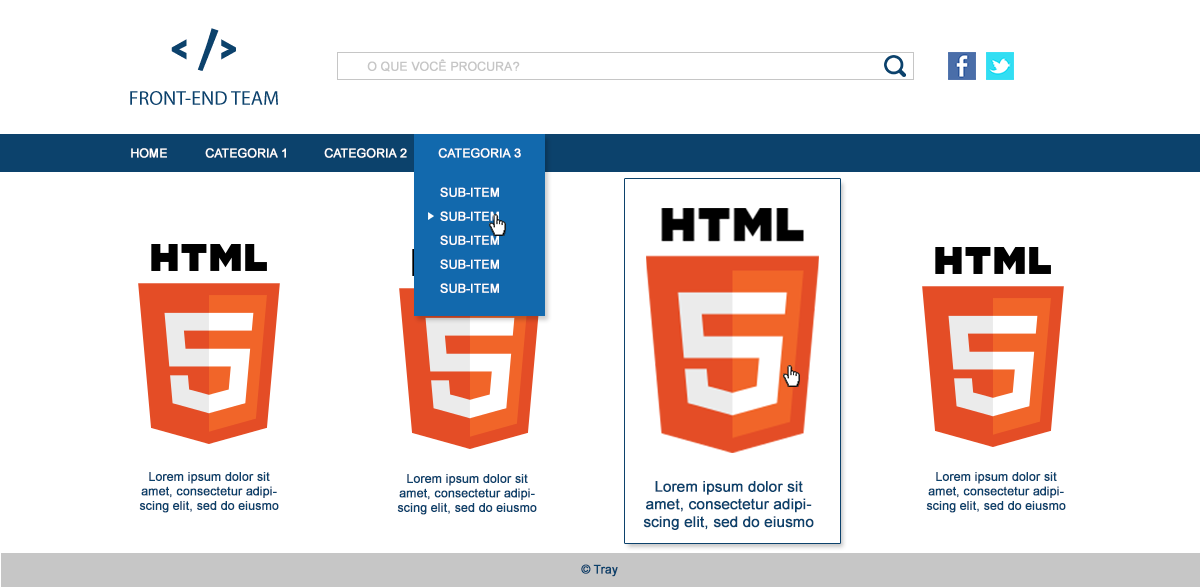
<style>
.page{position:relative;width:1200px;height:587px;background:#ffffff}
.page>*{position:absolute;margin:0}
.t1{font:12px "ArialMT";color:#c6c6c6;text-transform:uppercase;font-weight:bold}
.t2{font:12px "ArialMT";color:#ffffff;text-transform:uppercase;font-weight:bold}
.t3{font:12px/24px "ArialMT";color:#ffffff;text-transform:uppercase;font-weight:bold}
.t4{font:12px "ArialMT";color:#0c426c;font-weight:bold}
.t5{font:14.7px "ArialMT";color:#0c426c;font-weight:bold}
</style>
<div class="page">
<p class="t1" style="left:367px;top:59px;width:153px;height:13px">O que você procura?</p>
<p class="t2" style="left:131px;top:148px;width:36px;height:10px">HOME</p>
<p class="t2" style="left:205px;top:148px;width:81px;height:10px">CATEGORIA 1</p>
<p class="t2" style="left:324px;top:148px;width:83px;height:10px">CATEGORIA 2</p>
<p class="t2" style="left:438px;top:148px;width:83px;height:10px">CATEGORIA 3</p>
<p class="t3" style="left:440px;top:187px;width:59px;height:106px">SUB-ITEM<br>SUB-ITEM<br>SUB-ITEM<br>SUB-ITEM<br>SUB-ITEM</p>
<p class="t4" style="left:139px;top:472px;width:140px;height:41px;text-align:center">Lorem ipsum dolor sit amet, consectetur adipiscing elit, sed do eiusmo</p>
<p class="t4" style="left:926px;top:472px;width:140px;height:41px;text-align:center">Lorem ipsum dolor sit amet, consectetur adipiscing elit, sed do eiusmo</p>
<p class="t4" style="left:397px;top:474px;width:140px;height:41px;text-align:center">Lorem ipsum dolor sit amet, consectetur adipiscing elit, sed do eiusmo</p>
<p class="t5" style="left:643px;top:481px;width:171px;height:49px;text-align:center">Lorem ipsum dolor sit amet, consectetur adipiscing elit, sed do eiusmo</p>
<p class="t4" style="left:581px;top:564px;width:37px;height:13px">© Tray</p>
</div>
